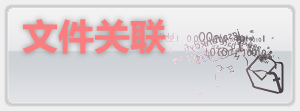
<style>
.page{position:relative;width:300px;height:111px}
.page>*{position:absolute;margin:0}
.t1{font:36px "MicrosoftYaHei";color:#fc7d7f}
</style>
<div class="page">
<p class="t1" style="left:22px;top:18px;width:144px;height:36px">文件关联</p>
</div>
